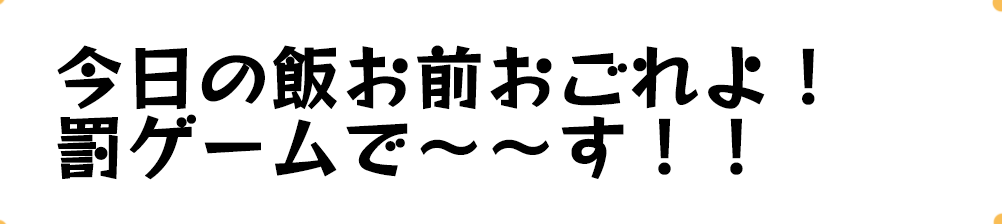
<style>
.page{position:relative;width:1002px;height:224px;background:#ffffff}
.page>*{position:absolute;margin:0}
.t1{font:70px/70px "RocknRollOne-Regular";color:#000000;font-weight:bold}
</style>
<div class="page">
<p class="t1" style="left:57px;top:45px;width:758px;height:135px">今日の飯お前おごれよ！<br>罰ゲームで～～す！！</p>
</div>
